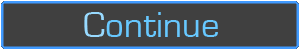
<style>
.page{position:relative;width:300px;height:50px;background:#404040}
.page>*{position:absolute;margin:0}
.t1{font:37.4px "EurostileRegular";color:#67c8ff}
.t2{font:37.4px "EurostileRegular";color:#98daff}
</style>
<div class="page">
<p class="t1" style="left:84px;top:12px;width:134px;height:25px"><span class="t2">C</span>ontinue</p>
</div>
